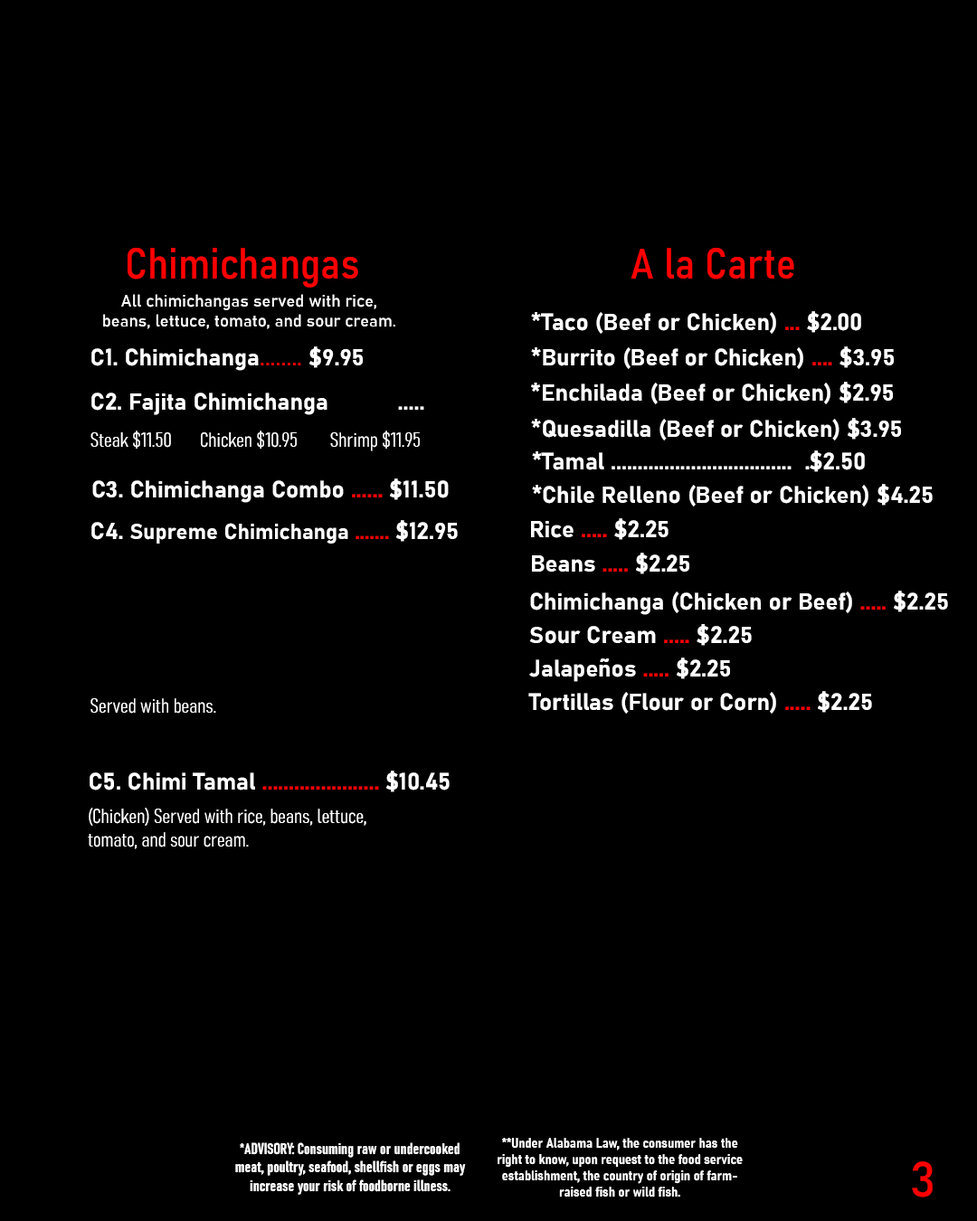
<style>
.page{position:relative;width:977px;height:1221px;background:#000000}
.page>*{position:absolute;margin:0}
.t1{font:42.9px "Bahnschrift-SemiCondensed";color:#ff0000}
.t2{font:16.7px "Bahnschrift";color:#ffffff}
.t3{font:23.5px "Bahnschrift-Bold";color:#ffffff}
.t4{font:23.5px "Bahnschrift-Bold";color:#ff0000}
.t5{font:23.5px "Bahnschrift";color:#ff0000}
.t6{font:20.1px "Bahnschrift-LightCondensed";color:#ffffff}
.t7{font:21.7px "Bahnschrift-Bold";color:#ffffff}
.t8{font:21.7px "Bahnschrift-Bold";color:#ff0000}
.t9{font:23.7px "Bahnschrift-Bold";color:#ffffff}
.t10{font:23.7px "Bahnschrift-Bold";color:#ff0000}
.t11{font:15.6px "Bahnschrift-BoldCondensed";color:#ffffff}
.t12{font:13.6px "Bahnschrift-BoldSemiCondensed";color:#ffffff}
.t13{font:48.9px "Bahnschrift";color:#ff0000}
</style>
<div class="page">
<p class="t1" style="left:128px;top:248px;width:230px;height:40px">Chimichangas</p>
<p class="t1" style="left:630px;top:248px;width:164px;height:31px">A la Carte</p>
<p class="t2" style="left:103px;top:294px;width:292px;height:35px;text-align:center">All chimichangas served with rice,<br>beans, lettuce, tomato, and sour cream.</p>
<p class="t3" style="left:531px;top:311px;width:330px;height:23px">*Taco (Beef or Chicken) <span class="t4">... </span>$2.00</p>
<p class="t3" style="left:91px;top:346px;width:272px;height:25px">C1. Chimichanga<span class="t5">........ </span>$9.95</p>
<p class="t3" style="left:531px;top:346px;width:363px;height:23px">*Burrito (Beef or Chicken) <span class="t4">.... </span>$3.95</p>
<p class="t3" style="left:531px;top:382px;width:362px;height:22px">*Enchilada (Beef or Chicken) $2.95</p>
<p class="t3" style="left:91px;top:392px;width:333px;height:23px">C2. Fajita Chimichanga           .....</p>
<p class="t3" style="left:531px;top:418px;width:370px;height:22px">*Quesadilla (Beef or Chicken) $3.95</p>
<p class="t6" style="left:90px;top:430px;width:330px;height:21px">Steak $11.50       Chicken $10.95        Shrimp $11.95</p>
<p class="t3" style="left:532px;top:450px;width:333px;height:22px">*Tamal ..................................  .$2.50</p>
<p class="t3" style="left:92px;top:478px;width:357px;height:25px">C3. Chimichanga Combo <span class="t4">......</span> $11.50</p>
<p class="t3" style="left:532px;top:484px;width:400px;height:22px">*Chile Relleno (Beef or Chicken) $4.25</p>
<p class="t7" style="left:91px;top:520px;width:367px;height:24px"><span class="t3">C4. </span>Supreme Chimichanga <span class="t8">....... </span><span class="t3">$12.95</span></p>
<p class="t4" style="left:531px;top:518px;width:137px;height:22px"><span class="t3">Rice </span>.....<span class="t3"> $2.25</span></p>
<p class="t3" style="left:532px;top:553px;width:157px;height:21px">Beans <span class="t4">.....</span> $2.25</p>
<p class="t3" style="left:530px;top:591px;width:418px;height:24px">Chimichanga (Chicken or Beef) <span class="t4">.....</span> $2.25</p>
<p class="t9" style="left:529px;top:624px;width:223px;height:22px">Sour Cream <span class="t10">.....</span> $2.25</p>
<p class="t3" style="left:529px;top:657px;width:201px;height:25px">Jalapeños <span class="t4">.....</span> $2.25</p>
<p class="t6" style="left:90px;top:698px;width:126px;height:16px">Served with beans.</p>
<p class="t3" style="left:528px;top:691px;width:344px;height:23px">Tortillas (Flour or Corn) <span class="t4">.....</span> $2.25</p>
<p class="t4" style="left:90px;top:771px;width:359px;height:21px"><span class="t3">C5. Chimi Tamal </span>......................<span class="t3"> $10.45</span></p>
<p class="t6" style="left:88px;top:808px;width:278px;height:41px">(Chicken) Served with rice, beans, lettuce,<br>tomato, and sour cream.</p>
<p class="t11" style="left:235px;top:1142px;width:231px;height:53px;text-align:center">*ADVISORY: Consuming raw or undercooked<br>meat, poultry, seafood, shellfish or eggs may<br>increase your risk of foodborne illness.</p>
<p class="t12" style="left:497px;top:1138px;width:245px;height:59px;text-align:center">**Under Alabama Law, the consumer has the<br>right to know, upon request to the food service<br>establishment, the country of origin of farm-<br>raised fish or wild fish.</p>
<p class="t13" style="left:912px;top:1161px;width:20px;height:36px">3</p>
</div>
